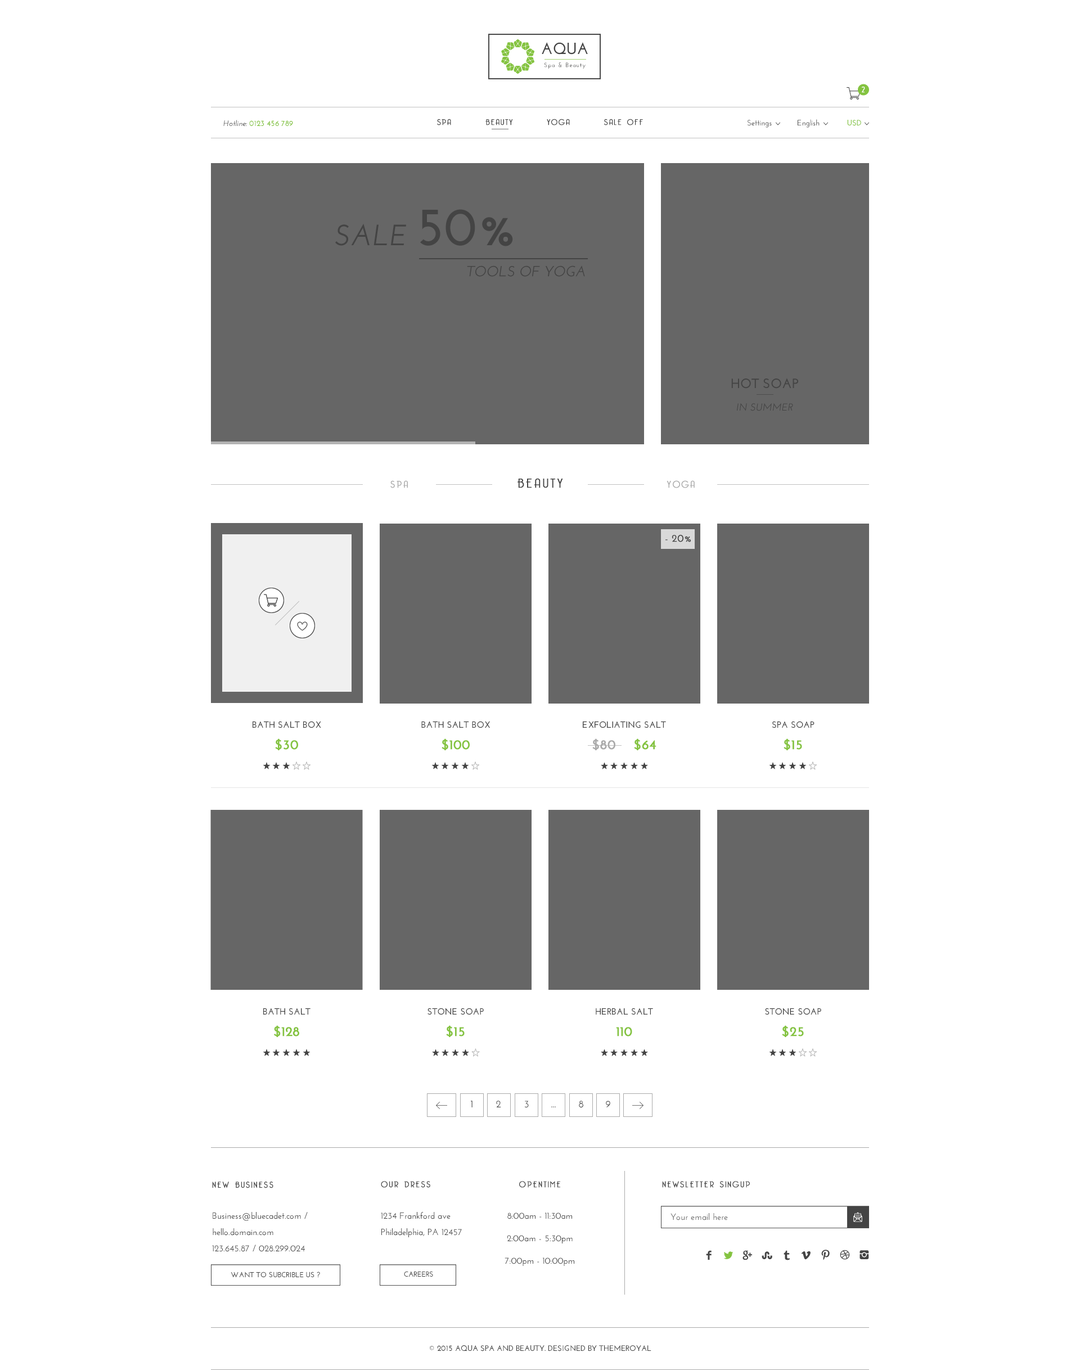
<style>
.page{position:relative;width:1080px;height:1370px;background:#ffffff}
.page>*{position:absolute;margin:0}
.t1{font:16.1px "JosefinSans-Bold";color:#444444}
.t2{font:6.1px "JosefinSans-SemiBold";letter-spacing:0.1em;color:#444444}
.t3{font:7.9px "BelleroseLight";color:#ffffff;font-weight:bold}
.t4{font:7.9px "JosefinSans-Bold";color:#84c33f}
.t5{font:7.9px "JosefinSans-SemiBoldItalic";color:#444444}
.t6{font:7.9px "BelleroseLight";letter-spacing:0.12em;color:#444444;font-weight:bold}
.t7{font:7.9px "JosefinSans-SemiBold";color:#444444}
.t8{font:29.3px "JosefinSans-SemiBoldItalic";color:#444444}
.t9{font:54.4px "JosefinSans-Bold";color:#444444}
.t10{font:14.7px "JosefinSans-SemiBoldItalic";color:#444444}
.t11{font:10.1px/22.3px "JosefinSans-SemiBoldItalic";color:#444444}
.t12{font:13.5px/29.7px "JosefinSans-Bold";color:#444444}
.t13{font:9.4px "BelleroseLight";letter-spacing:0.15em;color:#aaaaaa;font-weight:bold}
.t14{font:12.5px "BelleroseLight";letter-spacing:0.15em;color:#444444;font-weight:bold}
.t15{font:10.1px "JosefinSans-SemiBold";color:#444444;font-weight:bold}
.t16{font:9px/14.4px "JosefinSans-Bold";color:#444444}
.t17{font:13.5px/21.6px "JosefinSans-Bold";color:#84c33f;font-weight:bold}
.t18{font:13.5px/21.6px "JosefinSans-Bold";color:#aaaaaa;font-weight:bold}
.t19{font:10.1px "JosefinSans-SemiBold"}
.t20{font:10.1px "JosefinSans-SemiBold";color:#444444}
.t21{font:8.4px "BelleroseLight";letter-spacing:0.15em;color:#444444;font-weight:bold}
.t22{font:9px/16.2px "JosefinSans-SemiBold";color:#444444}
.t23{font:9px/22.5px "JosefinSans-SemiBold";color:#444444}
.t24{font:9px "JosefinSans-SemiBold";color:#666666}
.t25{font:7.3px "JosefinSans-Bold";color:#444444}
.t26{font:7.9px "JosefinSans-Bold";color:#444444}
</style>
<div class="page">
<p class="t1" style="left:542px;top:42px;width:46px;height:13px">AQUA</p>
<p class="t2" style="left:544px;top:62px;width:42px;height:7px">Spa &amp; Beauty</p>
<p class="t3" style="left:862px;top:87px;width:3px;height:6px">2</p>
<p class="t4" style="left:223px;top:120px;width:70px;height:6px"><span class="t5">Hotline: </span>0123 456 789</p>
<p class="t6" style="left:437px;top:119px;width:206px;height:6px">SPA       BEAUTY       YOGA       SALE OFF</p>
<p class="t7" style="left:747px;top:119px;width:114px;height:9px">Settings            English             <span class="t4">USD</span></p>
<p class="t8" style="left:335px;top:209px;width:178px;height:37px">SALE <span class="t9">50%</span></p>
<p class="t10" style="left:467px;top:266px;width:118px;height:11px">TOOLS OF YOGA</p>
<p class="t11" style="left:731px;top:378px;width:67px;height:33px;text-align:center"><span class="t12">HOT SOAP<br></span>IN SUMMER</p>
<p class="t13" style="left:390px;top:480px;width:18px;height:8px">SPA</p>
<p class="t14" style="left:518px;top:478px;width:45px;height:10px">BEAUTY</p>
<p class="t13" style="left:667px;top:480px;width:28px;height:8px">YOGA</p>
<p class="t15" style="left:665px;top:535px;width:26px;height:7px">- 20%</p>
<p class="t16" style="left:253px;top:721px;width:68px;height:29px;text-align:center">BATH SALT BOX<br><span class="t17">$30</span></p>
<p class="t16" style="left:421px;top:721px;width:69px;height:29px;text-align:center">BATH SALT BOX<br><span class="t17">$100</span></p>
<p class="t16" style="left:583px;top:721px;width:83px;height:29px;text-align:center">EXFOLIATING SALT<br><span class="t18">$80</span><span class="t17">    $64</span></p>
<p class="t16" style="left:772px;top:721px;width:42px;height:29px;text-align:center">SPA SOAP<br><span class="t17">$15</span></p>
<p class="t16" style="left:263px;top:1008px;width:47px;height:29px;text-align:center">BATH SALT<br><span class="t17">$128</span></p>
<p class="t16" style="left:428px;top:1008px;width:56px;height:29px;text-align:center">STONE SOAP<br><span class="t17">$15</span></p>
<p class="t16" style="left:596px;top:1008px;width:57px;height:29px;text-align:center">HERBAL SALT<br><span class="t17">110</span></p>
<p class="t16" style="left:765px;top:1008px;width:56px;height:29px;text-align:center">STONE SOAP<br><span class="t17">$25</span></p>
<p class="t19" style="left:471px;top:1101px;width:1px;height:7px">1</p>
<p class="t20" style="left:496px;top:1101px;width:5px;height:7px">2</p>
<p class="t20" style="left:524px;top:1101px;width:5px;height:7px">3</p>
<p class="t19" style="left:551px;top:1106px;width:5px;height:2px">...</p>
<p class="t20" style="left:579px;top:1101px;width:4px;height:7px">8</p>
<p class="t20" style="left:606px;top:1101px;width:4px;height:7px">9</p>
<p class="t21" style="left:212px;top:1182px;width:61px;height:7px">NEW BUSINESS</p>
<p class="t21" style="left:381px;top:1181px;width:49px;height:7px">OUR DRESS</p>
<p class="t21" style="left:519px;top:1181px;width:41px;height:7px">OPENTIME</p>
<p class="t21" style="left:662px;top:1181px;width:88px;height:7px">NEWSLETTER SINGUP</p>
<p class="t22" style="left:212px;top:1212px;width:96px;height:40px">Business@bluecadet.com / hello.domain.com<br>123.645.87 / 028.299.024</p>
<p class="t22" style="left:381px;top:1212px;width:81px;height:26px">1234 Frankford ave <br>Philadelphia, PA 12457</p>
<p class="t23" style="left:505px;top:1213px;width:69px;height:53px;text-align:center">8:00am - 11:30am<br>2:00am - 5:30pm<br>7:00pm - 10:00pm</p>
<p class="t24" style="left:670px;top:1213px;width:58px;height:8px">Your email here</p>
<p class="t25" style="left:231px;top:1272px;width:89px;height:6px">WANT TO SUBCRIBLE US ?</p>
<p class="t25" style="left:404px;top:1271px;width:29px;height:6px">CAREERS</p>
<p class="t26" style="left:430px;top:1345px;width:221px;height:7px">© 2015 AQUA SPA AND BEAUTY. DESIGNED BY THEMEROYAL</p>
</div>
